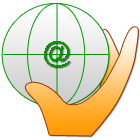
<style>
.page{position:relative;width:140px;height:140px;background:#ffffff}
.page>*{position:absolute;margin:0}
.t1{font:27.8px "ArialMT";color:#009900}
</style>
<div class="page">
<p class="t1" style="left:44px;top:41px;width:26px;height:26px">@</p>
</div>
